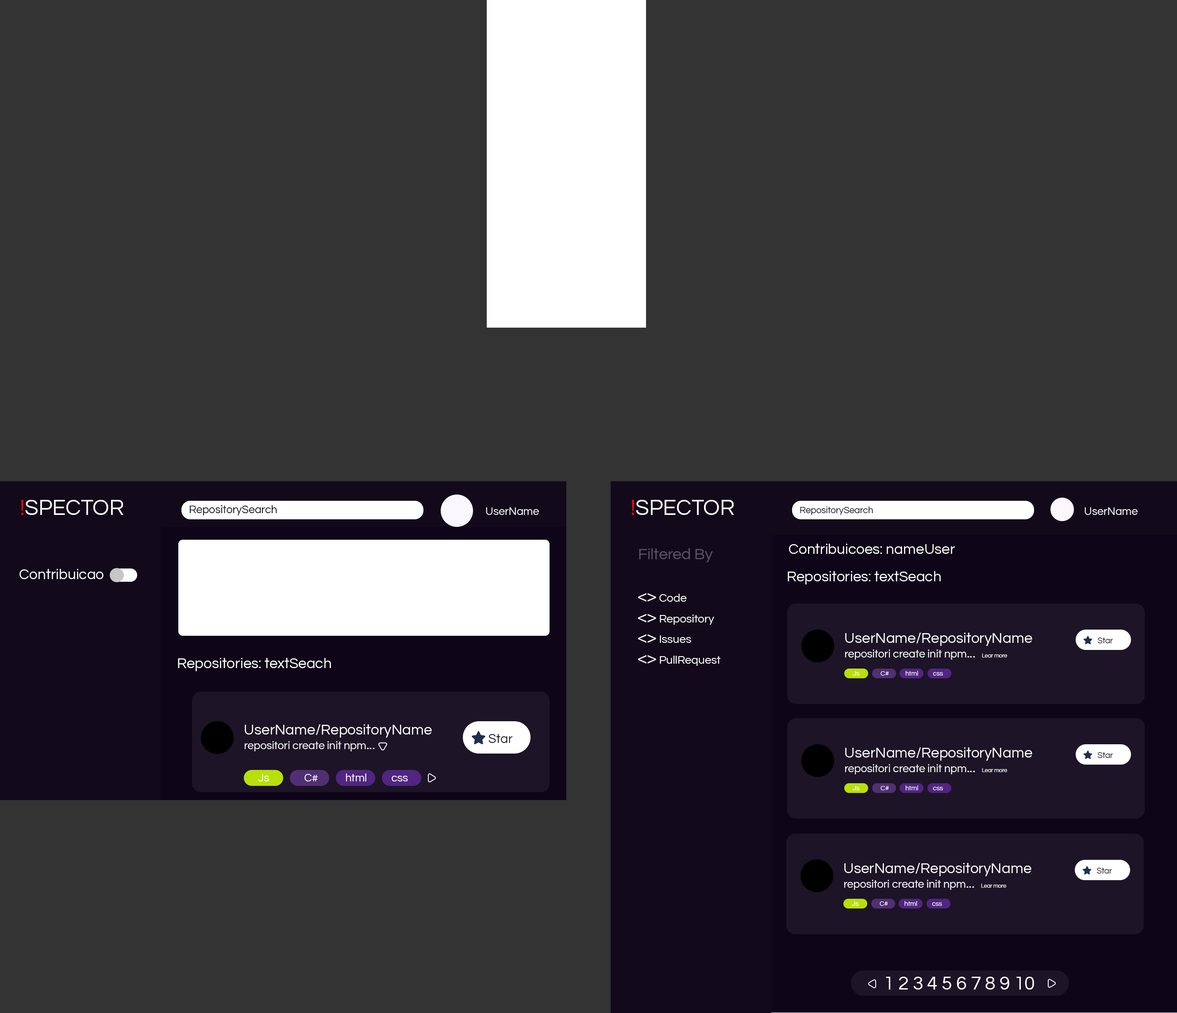
<style>
.page{position:relative;width:1177px;height:1013px;background:#333333}
.page>*{position:absolute;margin:0}
.t1{font:22.1px "Questrial-Regular";color:#ffffff}
.t2{font:22.1px "Questrial-Regular";color:#fc0505}
.t3{font:11.1px "Questrial-Regular";color:#120a1b}
.t4{font:11.1px "Questrial-Regular";color:#fbf7ff}
.t5{font:9.2px "Questrial-Regular";color:#120a1b}
.t6{font:14.7px "Questrial-Regular";color:#ffffff}
.t7{font:15.8px "Questrial-Regular";color:#5a5460}
.t8{font:14.8px "Questrial-Regular";color:#ffffff}
.t9{font:11.5px "Questrial-Regular";color:#ffffff}
.t10{font:17.3px "Questrial-Regular";color:#ffffff}
.t11{font:11.1px/14.7px "Questrial-Regular";color:#ffffff}
.t12{font:14.7px/14.7px "Questrial-Regular";color:#ffffff}
.t13{font:5.5px/14.7px "Questrial-Regular";color:#ffffff}
.t14{font:8.3px "Questrial-Regular";color:#1d1427}
.t15{font:6.6px "Questrial-Regular";color:#ffffff}
.t16{font:11.1px/14.8px "Questrial-Regular";color:#ffffff}
.t17{font:14.8px/14.8px "Questrial-Regular";color:#ffffff}
.t18{font:13px "Questrial-Regular";color:#1d1427}
.t19{font:11.1px "Questrial-Regular";color:#ffffff}
.t20{font:19px "Questrial-Regular";color:#ffffff}
</style>
<div class="page">
<p class="t1" style="left:21px;top:500px;width:102px;height:15px"><span class="t2">!</span>SPECTOR</p>
<p class="t3" style="left:189px;top:505px;width:88px;height:10px">RepositorySearch</p>
<p class="t4" style="left:486px;top:507px;width:53px;height:8px">UserName</p>
<p class="t1" style="left:632px;top:500px;width:102px;height:15px"><span class="t2">!</span>SPECTOR</p>
<p class="t5" style="left:800px;top:506px;width:73px;height:9px">RepositorySearch</p>
<p class="t4" style="left:1085px;top:507px;width:53px;height:8px">UserName</p>
<p class="t6" style="left:789px;top:544px;width:166px;height:10px">Contribuicoes: nameUser</p>
<p class="t7" style="left:639px;top:548px;width:74px;height:14px">Filtered By</p>
<p class="t8" style="left:19px;top:569px;width:85px;height:10px">Contribuicao</p>
<p class="t6" style="left:788px;top:571px;width:153px;height:13px">Repositories: textSeach</p>
<p class="t9" style="left:638px;top:593px;width:49px;height:9px"><span class="t10">&lt;&gt;</span> Code</p>
<p class="t9" style="left:638px;top:613px;width:76px;height:12px"><span class="t10">&lt;&gt;</span> Repository</p>
<p class="t9" style="left:638px;top:634px;width:53px;height:9px"><span class="t10">&lt;&gt;</span> Issues</p>
<p class="t11" style="left:845px;top:633px;width:188px;height:27px"><span class="t12">UserName/RepositoryName<br></span>repositori create init npm<span class="t12">...  </span><span class="t13">Lear more</span></p>
<p class="t14" style="left:1098px;top:637px;width:16px;height:6px">Star</p>
<p class="t8" style="left:178px;top:658px;width:153px;height:13px">Repositories: textSeach</p>
<p class="t9" style="left:638px;top:655px;width:83px;height:11px"><span class="t10">&lt;&gt;</span> PullRequest</p>
<p class="t15" style="left:853px;top:671px;width:7px;height:4px">Js</p>
<p class="t15" style="left:881px;top:671px;width:8px;height:4px">C#</p>
<p class="t15" style="left:906px;top:671px;width:12px;height:4px">html</p>
<p class="t15" style="left:933px;top:672px;width:10px;height:3px">css</p>
<p class="t16" style="left:245px;top:724px;width:187px;height:27px"><span class="t17">UserName/RepositoryName<br></span>repositori create init npm<span class="t17">...</span></p>
<p class="t18" style="left:489px;top:734px;width:24px;height:9px">Star</p>
<p class="t11" style="left:845px;top:747px;width:188px;height:27px"><span class="t12">UserName/RepositoryName<br></span>repositori create init npm<span class="t12">...  </span><span class="t13">Lear more</span></p>
<p class="t14" style="left:1098px;top:752px;width:16px;height:6px">Star</p>
<p class="t19" style="left:258px;top:774px;width:11px;height:7px">Js</p>
<p class="t19" style="left:305px;top:774px;width:13px;height:7px">C#</p>
<p class="t19" style="left:346px;top:773px;width:21px;height:8px">html</p>
<p class="t19" style="left:392px;top:776px;width:16px;height:5px">css</p>
<p class="t15" style="left:853px;top:786px;width:7px;height:4px">Js</p>
<p class="t15" style="left:881px;top:786px;width:8px;height:4px">C#</p>
<p class="t15" style="left:906px;top:785px;width:12px;height:5px">html</p>
<p class="t15" style="left:933px;top:787px;width:10px;height:3px">css</p>
<p class="t11" style="left:845px;top:863px;width:187px;height:27px"><span class="t12">UserName/RepositoryName<br></span>repositori create init npm<span class="t12">...  </span><span class="t13">Lear more</span></p>
<p class="t14" style="left:1097px;top:868px;width:16px;height:5px">Star</p>
<p class="t15" style="left:852px;top:901px;width:7px;height:5px">Js</p>
<p class="t15" style="left:880px;top:901px;width:8px;height:5px">C#</p>
<p class="t15" style="left:905px;top:901px;width:13px;height:5px">html</p>
<p class="t15" style="left:932px;top:902px;width:10px;height:4px">css</p>
<p class="t20" style="left:886px;top:976px;width:148px;height:13px">1 2 3 4 5 6 7 8 9 10</p>
</div>
